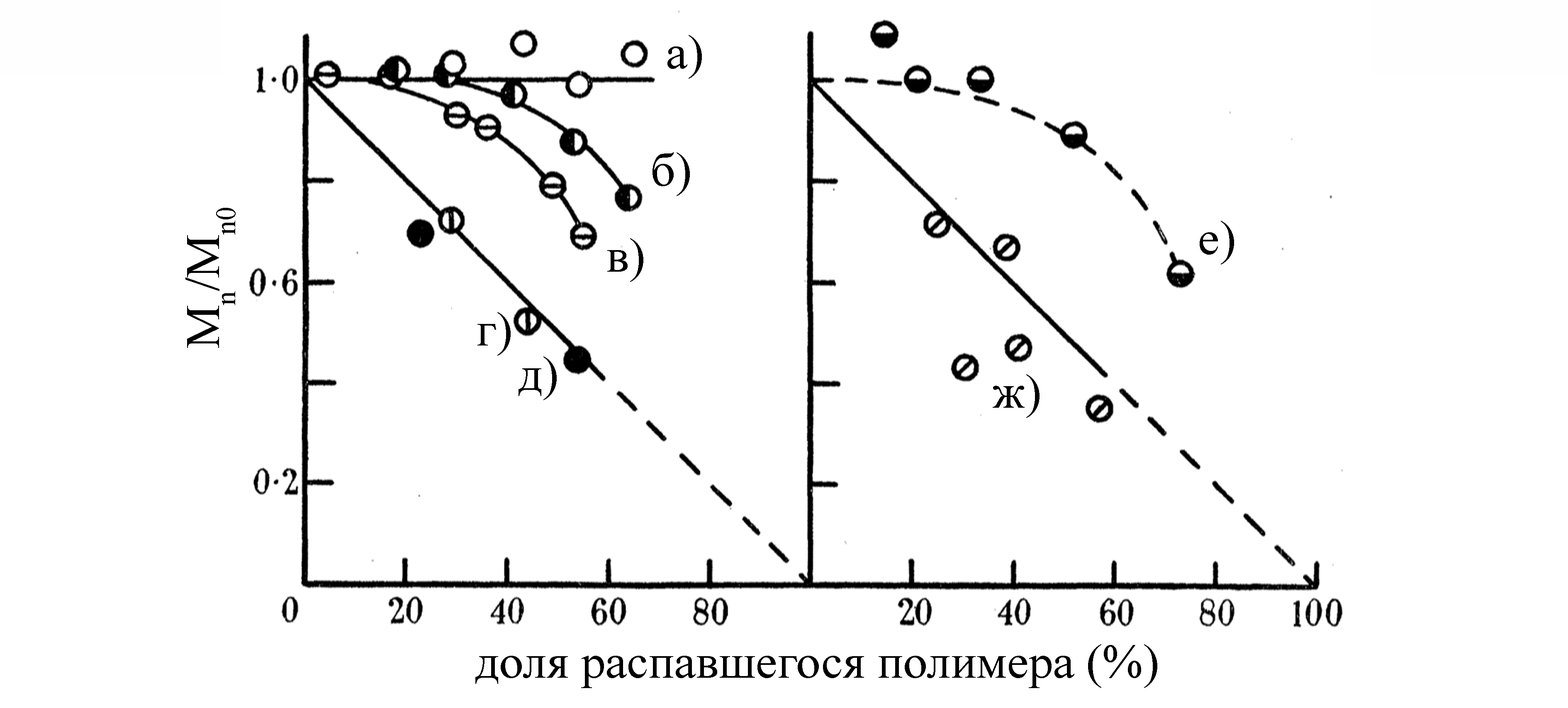
<style>
.page{position:relative;width:1568px;height:708px;background:#ffffff}
.page>*{position:absolute;margin:0}
.t1{font:48.4px "TimesNewRomanPSMT";color:#000000}
</style>
<div class="page">
<p class="t1" style="left:667px;top:35px;width:35px;height:44px">a)</p>
<p class="t1" style="left:653px;top:152px;width:37px;height:44px">б)</p>
<p class="t1" style="left:185px;top:208px;width:51px;height:140px;rotate:-90deg">Mn/Mn0</p>
<p class="t1" style="left:1200px;top:221px;width:34px;height:44px">е)</p>
<p class="t1" style="left:607px;top:238px;width:36px;height:44px">в)</p>
<p class="t1" style="left:477px;top:312px;width:34px;height:44px">г)</p>
<p class="t1" style="left:519px;top:356px;width:38px;height:44px">д)</p>
<p class="t1" style="left:993px;top:374px;width:47px;height:44px">ж)</p>
<p class="t1" style="left:475px;top:644px;width:682px;height:44px">доля распавшегося полимера (%)</p>
</div>
